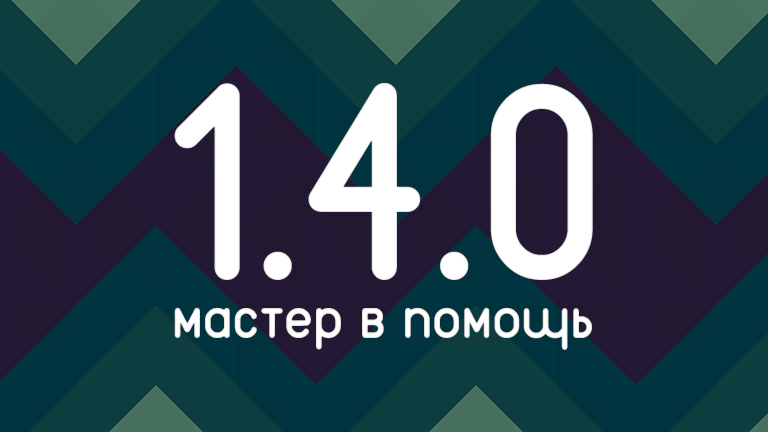
<style>
.page{position:relative;width:768px;height:432px}
.page>*{position:absolute;margin:0}
.t1{font:272.8px "Reef-Bold";letter-spacing:0.01em;color:#ffffff}
.t2{font:60px "Reef-Bold";letter-spacing:0.01em;color:#ffffff}
</style>
<div class="page">
<p class="t1" style="left:174px;top:83px;width:419px;height:197px">1.4.0</p>
<p class="t2" style="left:174px;top:307px;width:418px;height:43px">мастер в помощь</p>
</div>
